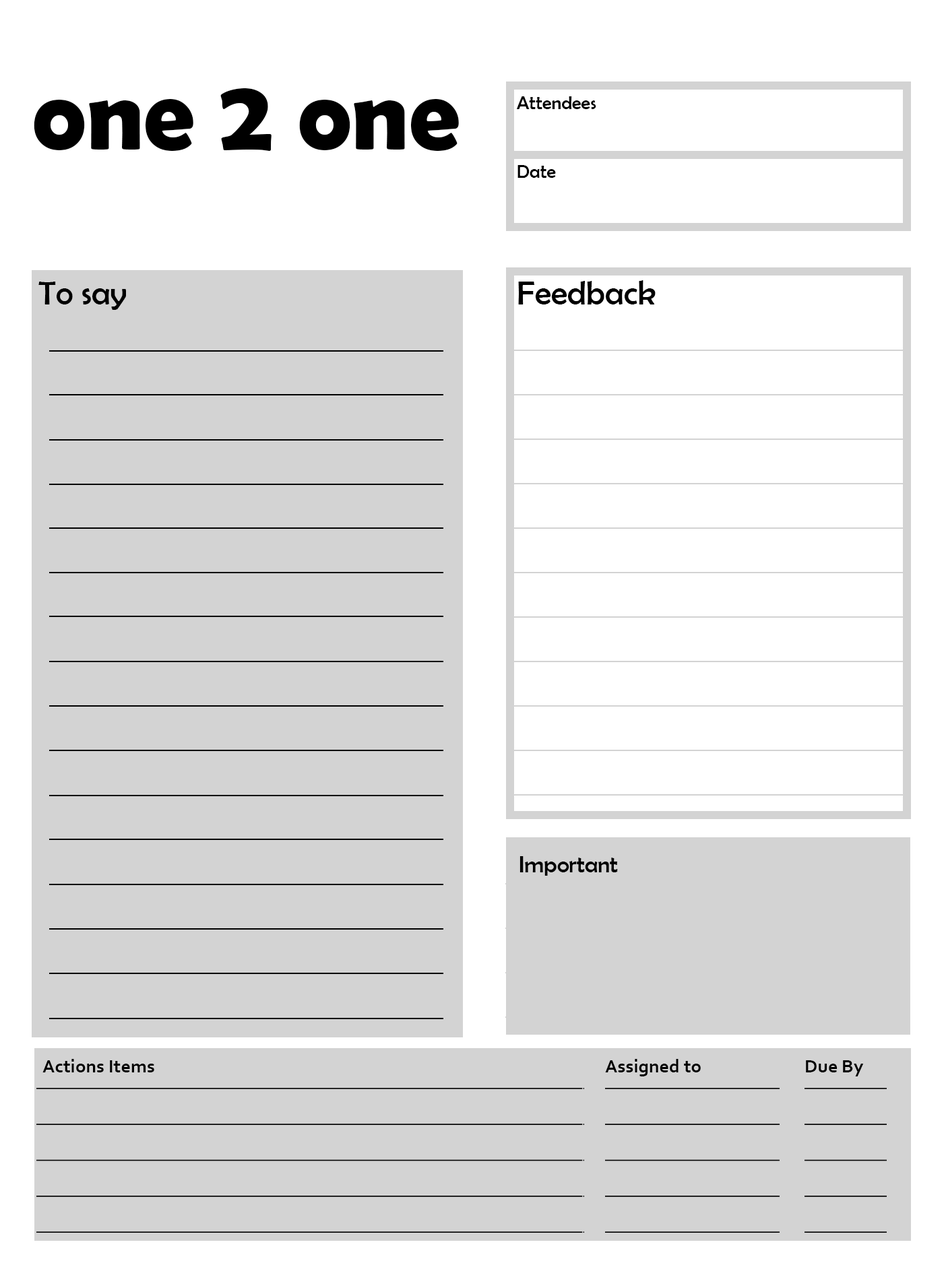
<style>
.page{position:relative;width:946px;height:1261px;background:#d3d3d3}
.page>*{position:absolute;margin:0}
.t1{font:101.5px "BerlinSansFBDemi-Bold";color:#000000}
.t2{font:19px "BerlinSansFB-Reg";color:#000000}
.t3{font:33.8px "BerlinSansFB-Reg";color:#000000}
.t4{font:23.3px "BerlinSansFB-Reg";color:#000000}
</style>
<div class="page">
<p class="t1" style="left:34px;top:88px;width:425px;height:63px">one 2 one</p>
<p class="t2" style="left:517px;top:96px;width:79px;height:13px">Attendees</p>
<p class="t2" style="left:517px;top:165px;width:39px;height:13px">Date</p>
<p class="t3" style="left:38px;top:282px;width:88px;height:28px">To say</p>
<p class="t3" style="left:518px;top:280px;width:137px;height:24px">Feedback</p>
<p class="t4" style="left:519px;top:856px;width:99px;height:20px">Important</p>
</div>
